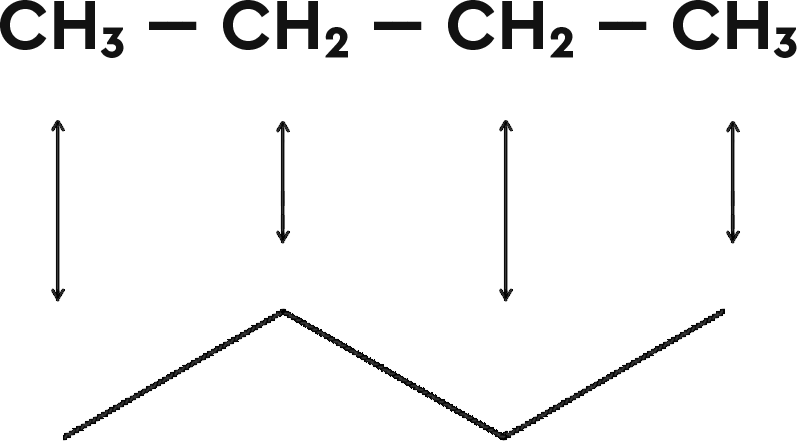
<style>
.page{position:relative;width:797px;height:446px;background:#ffffff}
.page>*{position:absolute;margin:0}
.t1{font:72px "CeraPro-Bold";color:#121212}
</style>
<div class="page">
<p class="t1" style="left:0px;top:0px;width:797px;height:58px">CH₃ --- CH₂ --- CH₂ --- CH₃</p>
</div>
